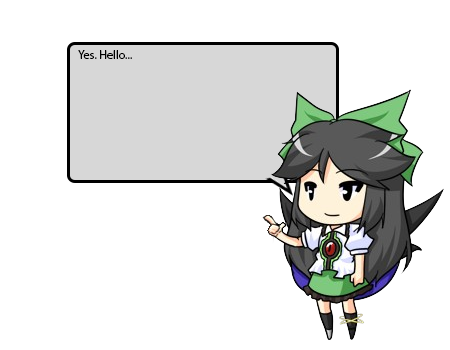
<style>
.page{position:relative;width:450px;height:350px;background:#ffffff}
.page>*{position:absolute;margin:0}
.t1{font:12px "MyriadPro-Regular";color:#000000}
</style>
<div class="page">
<p class="t1" style="left:78px;top:50px;width:54px;height:9px">Yes. Hello...</p>
</div>
